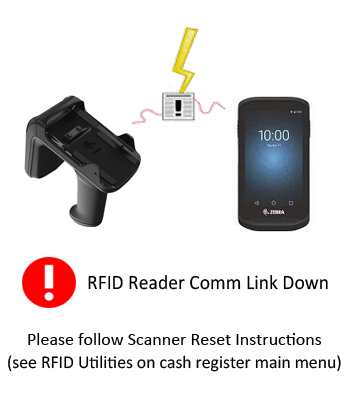
<style>
.page{position:relative;width:350px;height:400px;background:#ffffff}
.page>*{position:absolute;margin:0}
.t1{font:20.5px "Calibri";color:#000000;scale:0.96 1}
.t2{font:18px "Calibri";color:#000000}
</style>
<div class="page">
<p class="t1" style="left:88px;top:275px;width:240px;height:15px">RFID Reader Comm Link Down</p>
<p class="t2" style="left:28px;top:333px;width:294px;height:12px">Please follow Scanner Reset Instructions</p>
<p class="t2" style="left:8px;top:355px;width:333px;height:17px">(see RFID Utilities on cash register main menu)</p>
</div>
